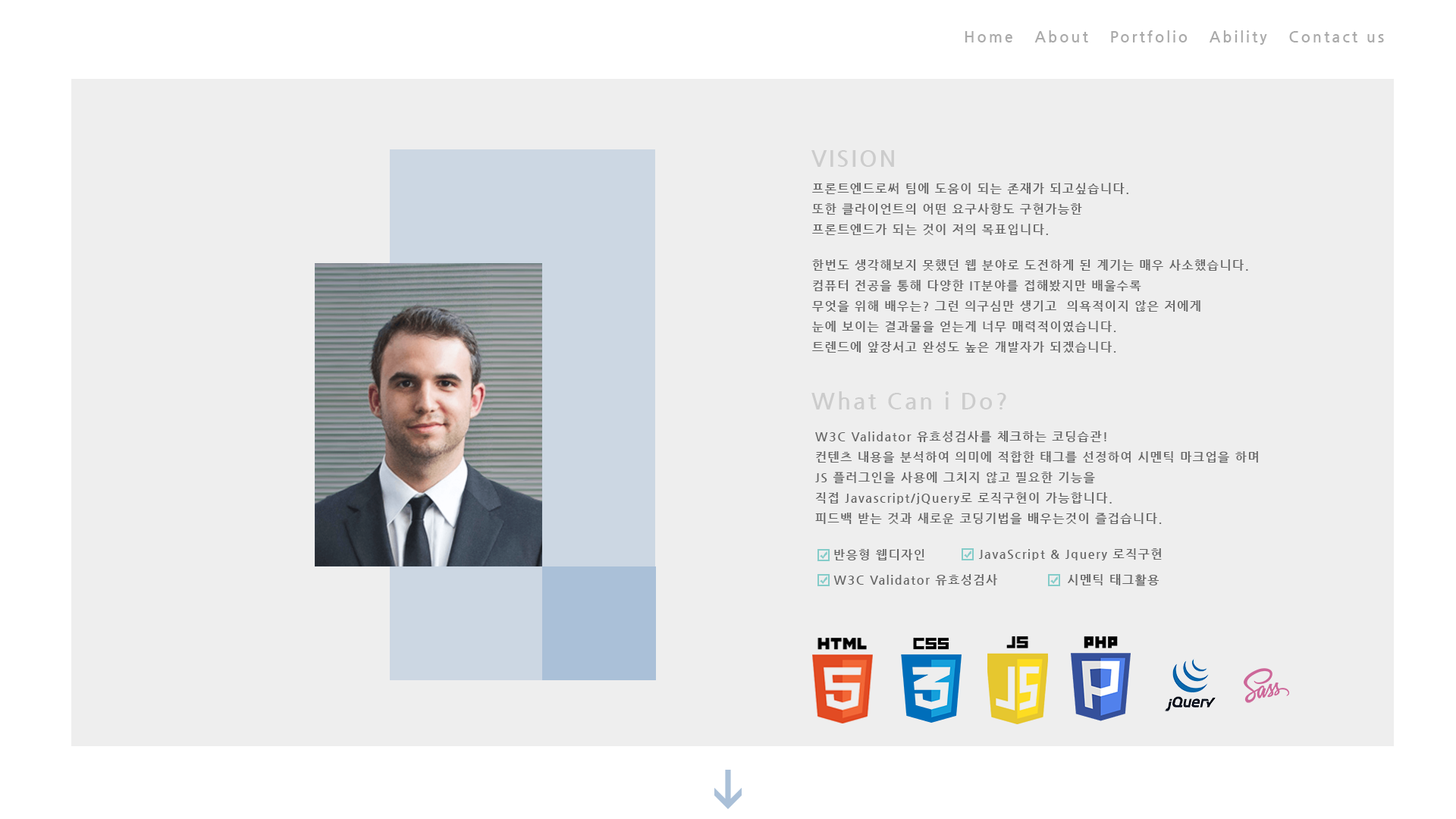
<style>
.page{position:relative;width:1456px;height:819px;background:#eeeeee}
.page>*{position:absolute;margin:0}
.t1{font:15.2px "NanumGothicBold";letter-spacing:0.15em;color:#aaaaaa}
.t2{font:22.7px "NanumGothicBold";letter-spacing:0.1em;color:#cccccc}
.t3{font:12.1px/20.5px "NanumGothicBold";letter-spacing:0.1em;color:#666666}
.t4{font:12.1px "NanumGothicBold";letter-spacing:0.1em;color:#666666}
</style>
<div class="page">
<p class="t1" style="left:965px;top:30px;width:419px;height:15px">Home   About   Portfolio   Ability   Contact us</p>
<p class="t2" style="left:811px;top:150px;width:83px;height:17px">VISION</p>
<p class="t3" style="left:812px;top:183px;width:436px;height:170px">프론트엔드로써 팀에 도움이 되는 존재가 되고싶습니다.<br>또한 클라이언트의 어떤 요구사항도 구현가능한<br>프론트엔드가 되는 것이 저의 목표입니다.<br><br>한번도 생각해보지 못했던 웹 분야로 도전하게 된 계기는 매우 사소했습니다.<br>컴퓨터 전공을 통해 다양한 IT분야를 접해봤지만 배울수록<br>무엇을 위해 배우는? 그런 의구심만 생기고  의욕적이지 않은 저에게       <br>눈에 보이는 결과물을 얻는게 너무 매력적이였습니다.  <br>트렌드에 앞장서고 완성도 높은 개발자가 되겠습니다.</p>
<p class="t2" style="left:811px;top:391px;width:195px;height:18px">What Can i Do?</p>
<p class="t3" style="left:815px;top:431px;width:443px;height:94px">W3C Validator 유효성검사를 체크하는 코딩습관!<br>컨텐츠 내용을 분석하여 의미에 적합한 태그를 선정하여 시멘틱 마크업을 하며<br>JS 플러그인을 사용에 그치지 않고 필요한 기능을<br>직접 Javascript/jQuery로 로직구현이 가능합니다.<br>피드백 받는 것과 새로운 코딩기법을 배우는것이 즐겁습니다.</p>
<p class="t4" style="left:834px;top:549px;width:90px;height:11px">반응형 웹디자인</p>
<p class="t4" style="left:979px;top:548px;width:183px;height:12px">JavaScript &amp; Jquery 로직구현</p>
<p class="t4" style="left:833px;top:574px;width:164px;height:11px">W3C Validator 유효성검사</p>
<p class="t4" style="left:1068px;top:574px;width:91px;height:12px">시멘틱 태그활용</p>
</div>
